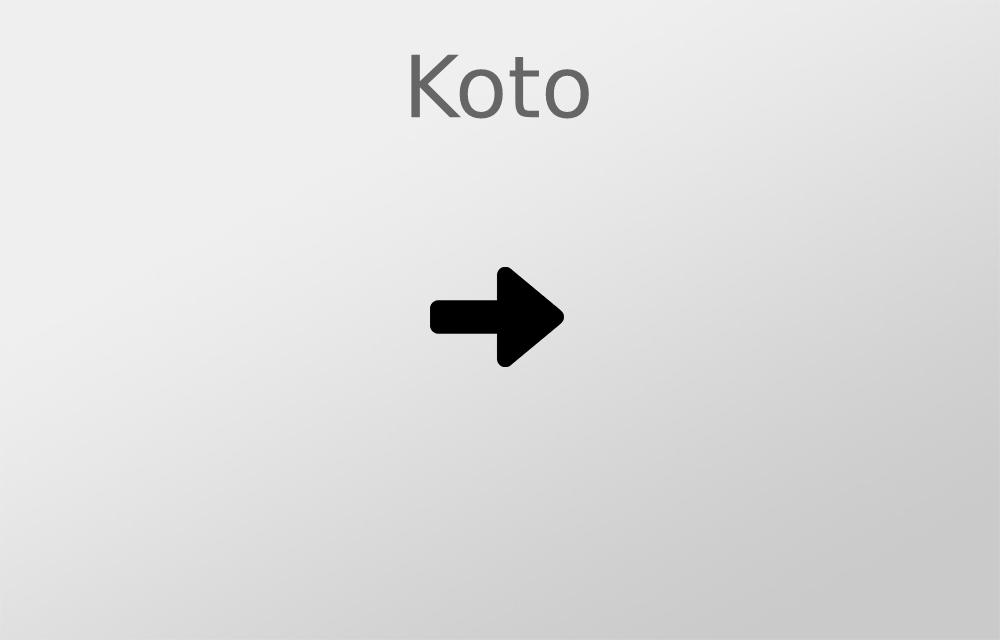
<style>
.page{position:relative;width:1000px;height:640px}
.page>*{position:absolute;margin:0}
.t1{font:85.7px "HelveticaNeue-Thin";color:#666666}
</style>
<div class="page">
<p class="t1" style="left:411px;top:54px;width:178px;height:65px">Koto</p>
</div>
